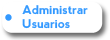
<style>
.page{position:relative;width:110px;height:40px;background:#ffffff}
.page>*{position:absolute;margin:0}
.t1{font:12px "nevis-Bold";color:#3399ff}
</style>
<div class="page">
<p class="t1" style="left:22px;top:5px;width:66px;height:24px">Administrar<br>Usuarios</p>
</div>
